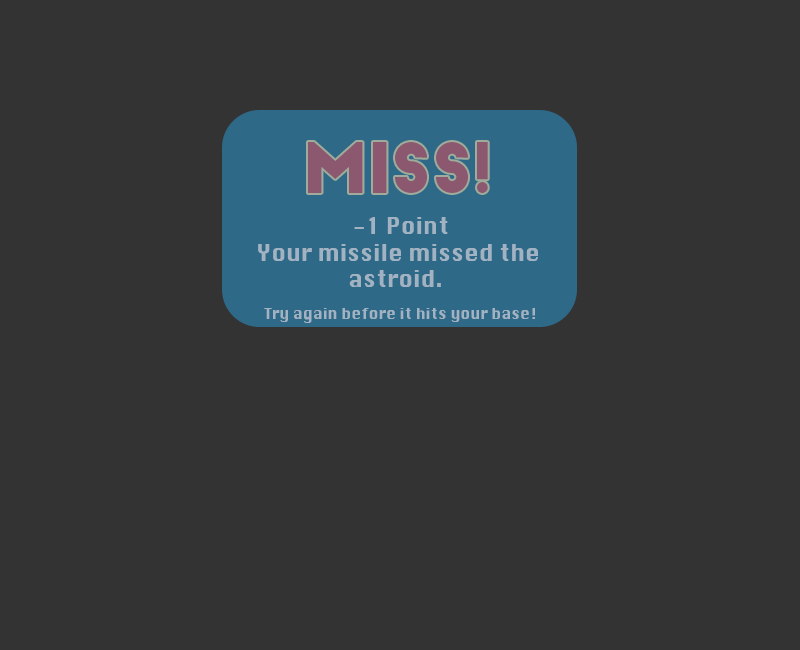
<style>
.page{position:relative;width:800px;height:650px;background:#333333}
.page>*{position:absolute;margin:0}
.t1{font:68.5px "BigJohn";color:#8b586f}
.t2{font:22.2px "Krungthep";color:#a1b3c2}
.t3{font:14.9px/31.4px "Krungthep";color:#a1b3c2}
</style>
<div class="page">
<p class="t1" style="left:308px;top:142px;width:180px;height:51px">MISS!</p>
<p class="t2" style="left:258px;top:217px;width:280px;height:106px;text-align:center">-1 Point<br>Your missile missed the <br>astroid.  <br><span class="t3">Try again before it hits your base!</span></p>
</div>
